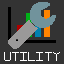
<style>
.page{position:relative;width:64px;height:64px;background:#333333}
.page>*{position:absolute;margin:0}
.t1{font:21.3px "Pixelated";color:#ffffff;scale:1.07 1}
</style>
<div class="page">
<p class="t1" style="left:4px;top:52px;width:56px;height:9px">UTILITY</p>
</div>
